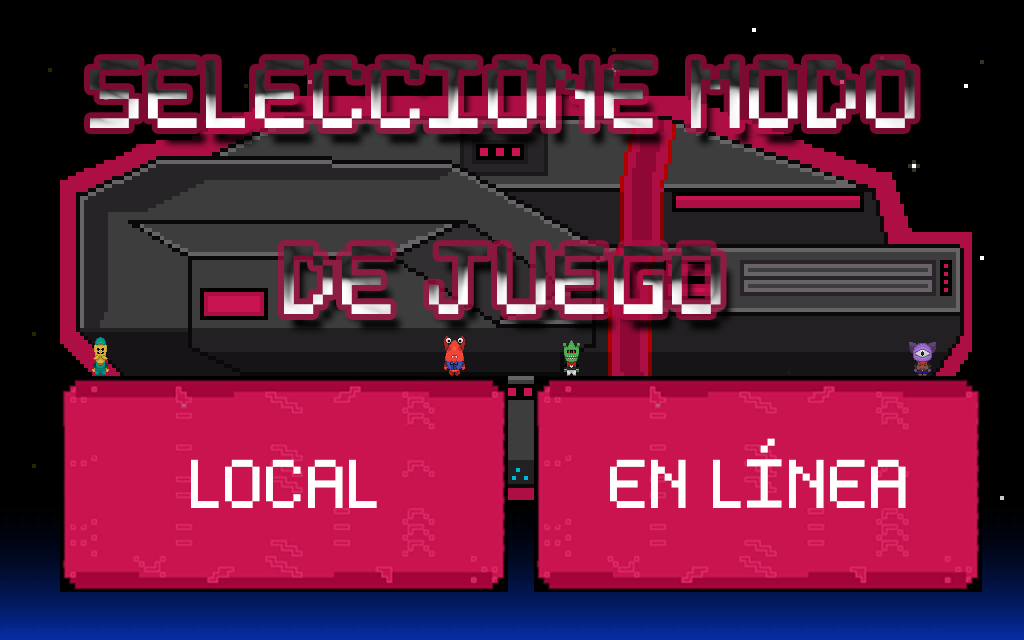
<style>
.page{position:relative;width:1024px;height:640px;background:#000000}
.page>*{position:absolute;margin:0}
.t1{font:155.1px "Essential"}
.t2{font:110px "Essential";color:#fefefe}
</style>
<div class="page">
<p class="t1" style="left:90px;top:60px;width:825px;height:254px;text-align:center">SELECCIONE MODO<br>DE JUEGO</p>
<p class="t2" style="left:610px;top:438px;width:296px;height:70px">EN LÍNEA</p>
<p class="t2" style="left:191px;top:459px;width:186px;height:49px">LOCAL</p>
</div>
